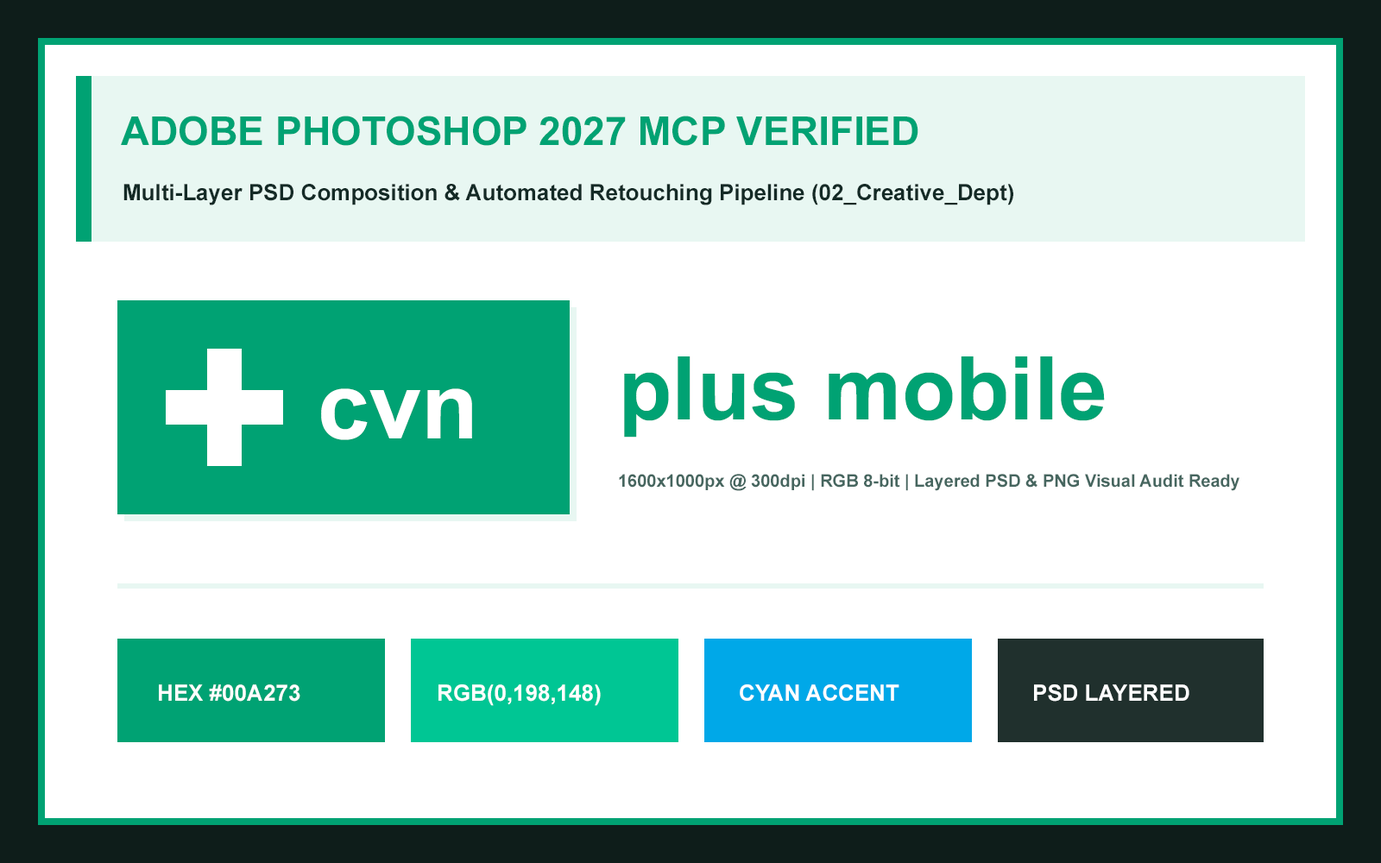
<style>
.page{position:relative;width:1381px;height:863px;background:#ffffff}
.page>*{position:absolute;margin:0}
.t1{font:39.7px "Arial-BoldMT";color:#00a273}
.t2{font:22.4px "Arial-BoldMT";color:#142a26}
.t3{font:88.1px "Arial-BoldMT";color:#00a273}
.t4{font:93.2px "Arial-BoldMT";color:#ffffff}
.t5{font:17.3px "Arial-BoldMT";color:#46665f}
.t6{font:22.4px "Arial-BoldMT";color:#ffffff}
</style>
<div class="page">
<p class="t1" style="left:121px;top:116px;width:798px;height:30px">ADOBE PHOTOSHOP 2027 MCP VERIFIED</p>
<p class="t2" style="left:123px;top:184px;width:891px;height:21px">Multi-Layer PSD Composition &amp; Automated Retouching Pipeline (02_Creative_Dept)</p>
<p class="t3" style="left:624px;top:357px;width:481px;height:81px">plus mobile</p>
<p class="t4" style="left:321px;top:388px;width:151px;height:52px">cvn</p>
<p class="t5" style="left:619px;top:474px;width:621px;height:17px">1600x1000px @ 300dpi | RGB 8-bit | Layered PSD &amp; PNG Visual Audit Ready</p>
<p class="t6" style="left:159px;top:685px;width:141px;height:17px">HEX #00A273</p>
<p class="t6" style="left:439px;top:685px;width:162px;height:21px">RGB(0,198,148)</p>
<p class="t6" style="left:740px;top:685px;width:160px;height:16px">CYAN ACCENT</p>
<p class="t6" style="left:1034px;top:685px;width:156px;height:17px">PSD LAYERED</p>
</div>
